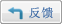
<style>
.page{position:relative;width:62px;height:24px;background:#f4f4f4}
.page>*{position:absolute;margin:0}
.t1{font:12px "SimSun";letter-spacing:0.05em;color:#3967a3}
</style>
<div class="page">
<p class="t1" style="left:29px;top:7px;width:24px;height:12px">反馈</p>
</div>
